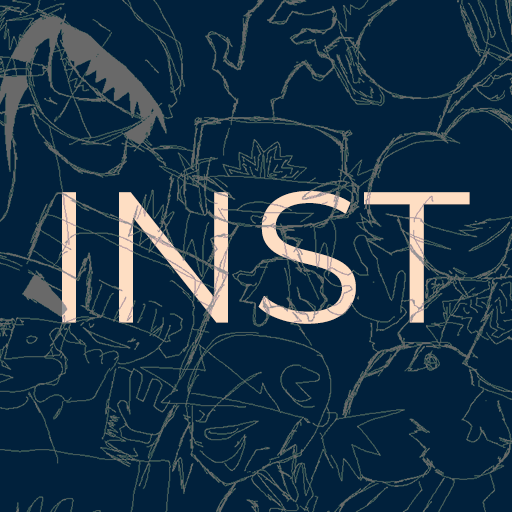
<style>
.page{position:relative;width:512px;height:512px;background:#01213c}
.page>*{position:absolute;margin:0}
.t1{font:186px "MontserratRoman-Regular";letter-spacing:0.005em;color:#fedec3;font-weight:bold;font-style:italic}
</style>
<div class="page">
<p class="t1" style="left:62px;top:191px;width:408px;height:133px">INST</p>
</div>
